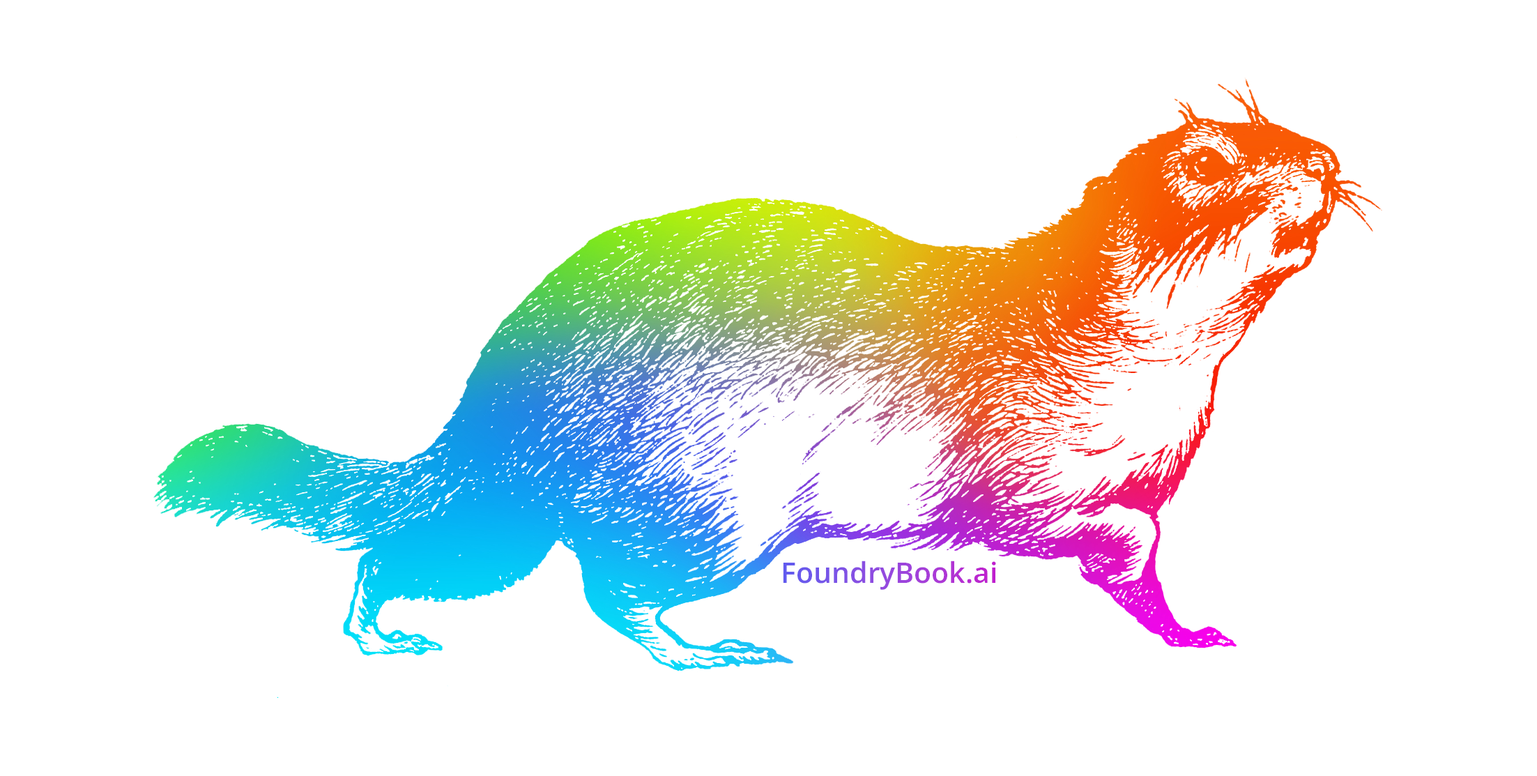
<style>
.page{position:relative;width:1537px;height:776px;background:#ffffff}
.page>*{position:absolute;margin:0}
.t1{font:28.6px "OpenSansRoman-SemiBold"}
</style>
<div class="page">
<p class="t1" style="left:783px;top:560px;width:213px;height:30px">FoundryBook.ai</p>
</div>
